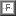
<style>
.page{position:relative;width:16px;height:16px;background:#ffffff}
.page>*{position:absolute;margin:0}
.t1{font:8px "MarkeEigenbauNormal";letter-spacing:0.12em;color:#666666}
</style>
<div class="page">
<p class="t1" style="left:6px;top:4px;width:4px;height:7px">F</p>
</div>
